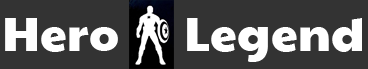
<style>
.page{position:relative;width:368px;height:69px;background:#333333}
.page>*{position:absolute;margin:0}
.t1{font:48px "PaytoneOne";letter-spacing:0.005em;color:#ffffff}
</style>
<div class="page">
<p class="t1" style="left:5px;top:18px;width:357px;height:44px">Hero       Legend</p>
</div>
